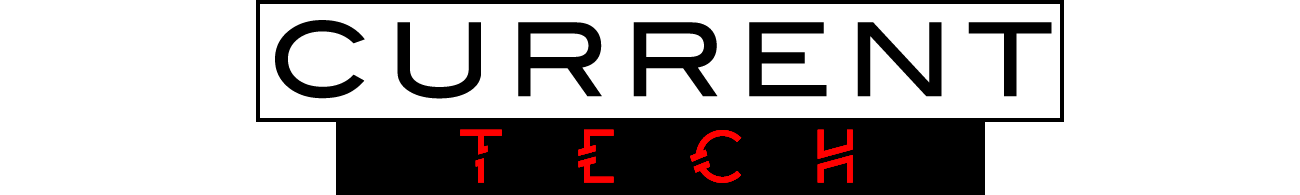
<style>
.page{position:relative;width:1300px;height:195px;background:#ffffff}
.page>*{position:absolute;margin:0}
.t1{font:101.6px "BlairMdITCTTMedium";letter-spacing:0.13em;color:#000000}
.t2{font:70px "Moondance";letter-spacing:1em;color:#ff0000}
</style>
<div class="page">
<p class="t1" style="left:275px;top:20px;width:777px;height:79px">CURRENT</p>
<p class="t2" style="left:460px;top:129px;width:393px;height:54px">TECH</p>
</div>
